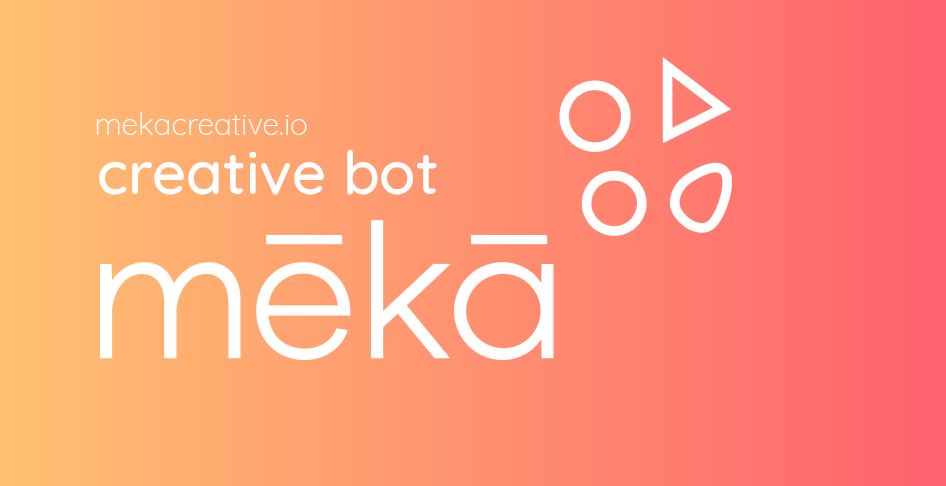
<style>
.page{position:relative;width:946px;height:486px}
.page>*{position:absolute;margin:0}
.t1{font:30px "Quicksand-Light";color:#ffffff}
.t2{font:60px "Quicksand-Medium";color:#ffffff}
</style>
<div class="page">
<p class="t1" style="left:96px;top:112px;width:211px;height:23px">mekacreative.io</p>
<p class="t2" style="left:99px;top:150px;width:338px;height:45px">creative bot</p>
</div>
